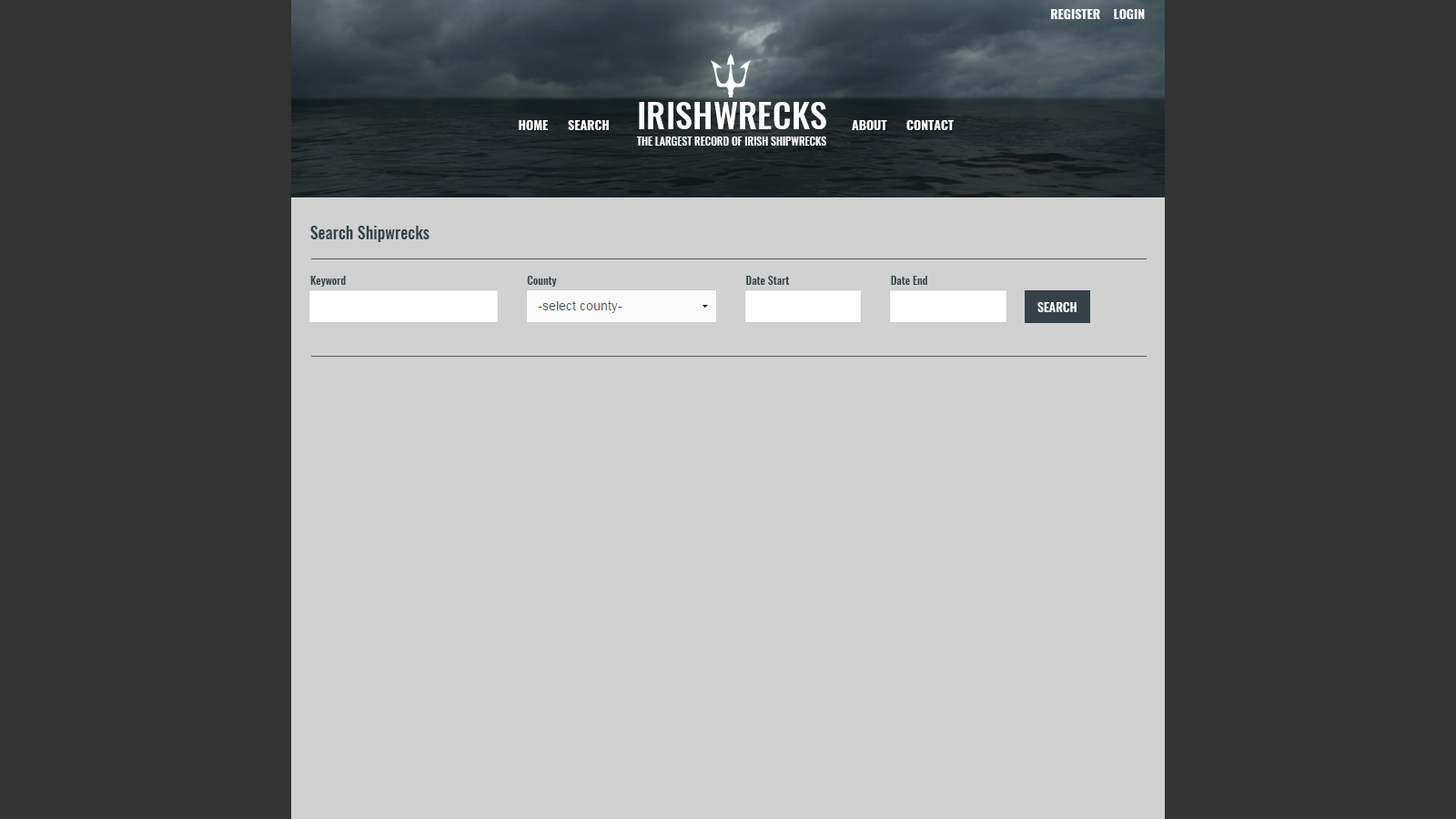
<style>
.page{position:relative;width:1456px;height:819px;background:#d1d1d1}
.page>*{position:absolute;margin:0}
.t1{font:12.7px "Oswald-Bold";color:#ffffff}
.t2{font:34.6px "Oswald-Medium";color:#ffffff}
.t3{font:10.9px "Oswald-Medium";letter-spacing:-0.01em;color:#ffffff}
.t4{font:16.4px "Oswald-Medium";color:#354248}
.t5{font:10.9px "Oswald-Medium";color:#354248}
.t6{font:12.7px "Oswald-Medium";color:#ffffff}
</style>
<div class="page">
<p class="t1" style="left:1051px;top:9px;width:94px;height:10px">REGISTER    LOGIN</p>
<p class="t2" style="left:639px;top:102px;width:187px;height:27px">IRISHWRECKS</p>
<p class="t1" style="left:519px;top:120px;width:435px;height:10px">HOME      SEARCH                                                                          ABOUT      CONTACT</p>
<p class="t3" style="left:636px;top:136px;width:190px;height:10px">THE LARGEST RECORD OF IRISH SHIPWRECKS</p>
<p class="t4" style="left:310px;top:226px;width:120px;height:16px">Search Shipwrecks</p>
<p class="t5" style="left:310px;top:276px;width:617px;height:11px">Keyword                                                                    County                                                                       Date Start                                      Date End</p>
<p class="t6" style="left:1037px;top:302px;width:40px;height:10px">SEARCH</p>
</div>
